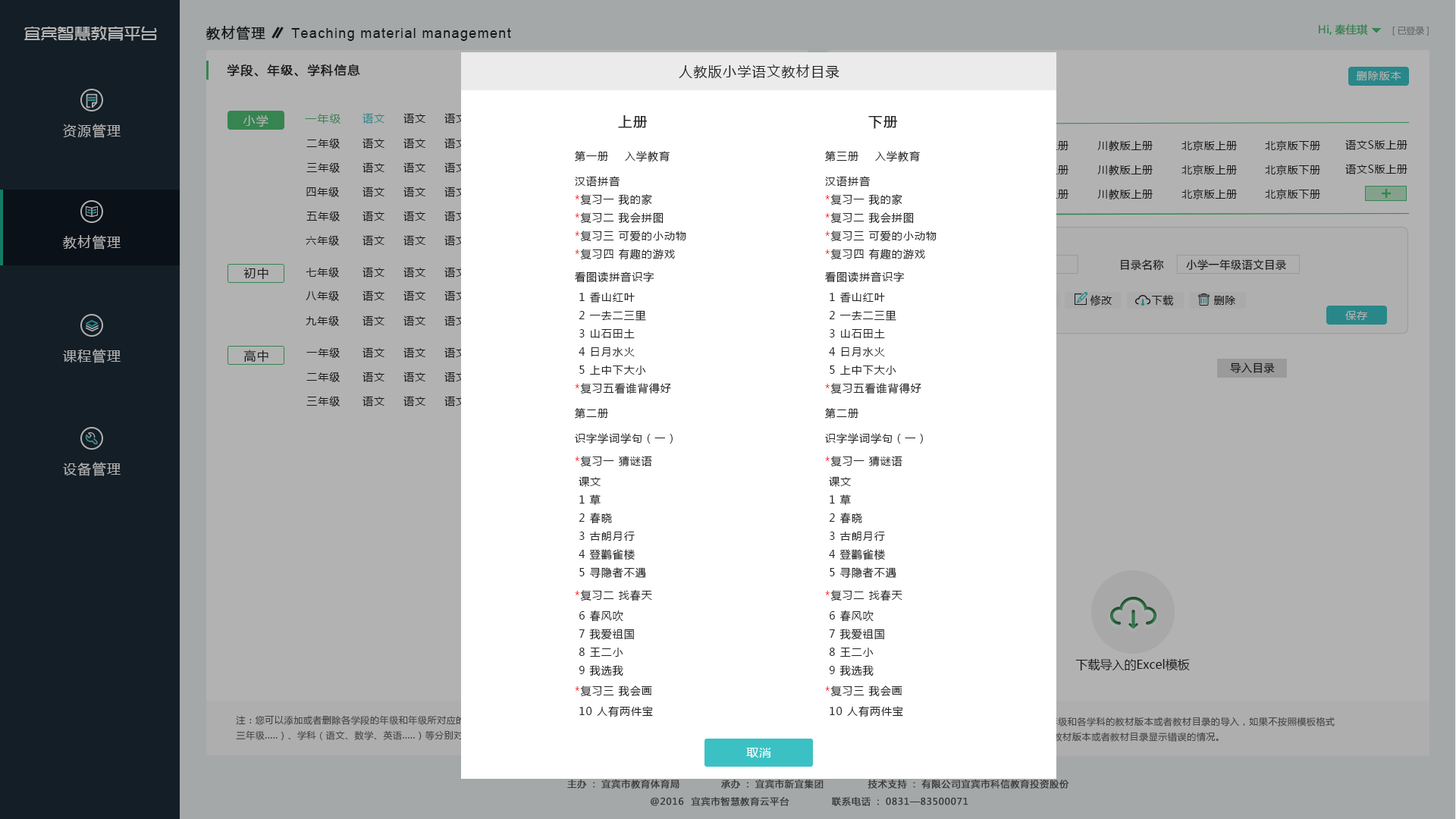
<style>
.page{position:relative;width:1456px;height:819px;background:#ffffff}
.page>*{position:absolute;margin:0}
.t1{font:16.7px "TRENDS";color:#b2b2b2}
.t2{font:13.6px "MicrosoftYaHei";letter-spacing:0.075em;color:#222222;font-weight:bold}
.t3{font:13.6px "ArialMT";letter-spacing:0.075em;color:#222222}
.t4{font:10.6px "MicrosoftYaHei";color:#368450;font-weight:bold}
.t5{font:9.1px "MicrosoftYaHei";letter-spacing:-0.01em;color:#5e5e5e}
.t6{font:12.1px "MicrosoftYaHei";letter-spacing:0.075em;color:#222222;font-weight:bold}
.t7{font:13.6px "MicrosoftYaHei";letter-spacing:0.075em;color:#222222}
.t8{font:10.6px "MicrosoftYaHei";letter-spacing:0.075em;color:#b2b2b2}
.t9{font:11.4px "MicrosoftYaHei";letter-spacing:0.075em;color:#368450}
.t10{font:10.6px "MicrosoftYaHei";letter-spacing:0.075em;color:#29878a}
.t11{font:10.6px "MicrosoftYaHei";letter-spacing:0.075em;color:#222222}
.t12{font:13.6px "MicrosoftYaHei";letter-spacing:0.075em;color:#b2b2b2}
.t13{font:12.1px "MicrosoftYaHei";letter-spacing:0.075em;color:#b2b2b2}
.t14{font:10.6px/18.2px "MicrosoftYaHei";letter-spacing:0.075em;color:#222222}
.t15{font:13.6px/18.2px "MicrosoftYaHei";letter-spacing:0.075em;color:#222222;font-weight:bold}
.t16{font:10.6px/25px "MicrosoftYaHei";letter-spacing:0.075em;color:#222222}
.t17{font:10.6px/18.2px "MicrosoftYaHei";letter-spacing:0.075em;color:#ff0000}
.t18{font:10.6px/22.7px "MicrosoftYaHei";letter-spacing:0.075em;color:#222222}
.t19{font:10.6px/20.5px "MicrosoftYaHei";letter-spacing:0.075em;color:#222222}
.t20{font:10.6px "MicrosoftYaHei";letter-spacing:0.05em;color:#222222}
.t21{font:12.1px "MicrosoftYaHei";letter-spacing:0.075em;color:#222222}
.t22{font:10.6px "MicrosoftYaHei";letter-spacing:0.05em;color:#b2b2b2}
.t23{font:12.1px "MicrosoftYaHei";color:#222222}
.t24{font:12.1px "MicrosoftYaHei";letter-spacing:0.05em;color:#ffffff}
.t25{font:9.1px "MicrosoftYaHei";letter-spacing:0.05em;color:#3b3b3b;font-weight:bold}
</style>
<div class="page">
<p class="t1" style="left:24px;top:26px;width:133px;height:15px">宜宾智慧教育平台</p>
<p class="t2" style="left:206px;top:26px;width:59px;height:14px">教材管理</p>
<p class="t3" style="left:291px;top:28px;width:220px;height:13px">Teaching material management</p>
<p class="t4" style="left:1319px;top:24px;width:49px;height:11px">Hi,秦佳琪</p>
<p class="t5" style="left:1392px;top:26px;width:37px;height:10px">[已登录]</p>
<p class="t6" style="left:227px;top:64px;width:133px;height:13px">学段、年级、学科信息</p>
<p class="t7" style="left:679px;top:64px;width:160px;height:15px">人教版小学语文教材目录</p>
<p class="t8" style="left:1356px;top:71px;width:45px;height:9px">删除版本</p>
<p class="t9" style="left:305px;top:114px;width:36px;height:10px">一年级</p>
<p class="t10" style="left:362px;top:113px;width:22px;height:11px">语文</p>
<p class="t11" style="left:403px;top:113px;width:22px;height:11px">语文</p>
<p class="t11" style="left:444px;top:113px;width:22px;height:11px">语文</p>
<p class="t12" style="left:63px;top:124px;width:58px;height:14px">资源管理</p>
<p class="t13" style="left:243px;top:115px;width:25px;height:12px">小学</p>
<p class="t14" style="left:575px;top:115px;width:111px;height:602px"><span class="t15">上册<br></span><br>第一册    入学教<span class="t16">育 <br></span>汉语拼音 <br><span class="t17">*</span>复习一 我的家<br><span class="t17">*</span>复习二 我会拼图<br><span class="t17">*</span>复习三 可爱的小动物<br><span class="t17">*</span>复习四 有趣的游<span class="t18">戏<br></span><span class="t19">看</span>图读拼音识<span class="t19">字<br></span> 1 香山红叶<br> 2 一去二三里<br> 3 山石田土<br> 4 日月水火<br> 5 上中下大小<br><span class="t17">*</span>复习五看谁背得<span class="t16">好<br></span>第二<span class="t16">册 <br></span><span class="t19">识</span>字学词学句（<span class="t18">一） <br></span><span class="t17">*</span>复习一 猜谜<span class="t19">语 <br></span> 课文   <br> 1 草<br> 2 春晓<br> 3 古朗月行<br> 4 登鹳雀楼 <br> 5 寻隐者不<span class="t18">遇<br></span><span class="t17">*</span>复习二 找春天  <br> 6 春风吹 <br> 7 我爱祖国 <br> 8 王二小 <br> 9 我选<span class="t19">我 <br></span><span class="t17">*</span>复习三 我会<span class="t19">画  <br></span> 10 人有两件宝 <br> 11 司马光<br> 12 聪明的华佗<br> 13 小猴子下山</p>
<p class="t14" style="left:825px;top:116px;width:112px;height:601px"><span class="t15">下册<br></span><br>第三册    入学教<span class="t16">育 <br></span>汉语拼音 <br><span class="t17">*</span>复习一 我的家<br><span class="t17">*</span>复习二 我会拼图<br><span class="t17">*</span>复习三 可爱的小动物<br><span class="t17">*</span>复习四 有趣的游<span class="t18">戏<br></span><span class="t19">看</span>图读拼音识<span class="t19">字<br></span> 1 香山红叶<br> 2 一去二三里<br> 3 山石田土<br> 4 日月水火<br> 5 上中下大小<br><span class="t17">*</span>复习五看谁背得<span class="t16">好<br></span>第二<span class="t16">册 <br></span><span class="t19">识</span>字学词学句（<span class="t18">一） <br></span><span class="t17">*</span>复习一 猜谜<span class="t19">语 <br></span> 课文   <br> 1 草<br> 2 春晓<br> 3 古朗月行<br> 4 登鹳雀楼 <br> 5 寻隐者不<span class="t18">遇<br></span><span class="t17">*</span>复习二 找春天  <br> 6 春风吹 <br> 7 我爱祖国 <br> 8 王二小 <br> 9 我选<span class="t19">我 <br></span><span class="t17">*</span>复习三 我会<span class="t19">画  <br></span> 10 人有两件宝 <br> 11 司马光<br> 12 聪明的华佗<br> 13 小猴子下山</p>
<p class="t11" style="left:306px;top:138px;width:34px;height:11px">二年级</p>
<p class="t11" style="left:362px;top:138px;width:22px;height:11px">语文</p>
<p class="t11" style="left:403px;top:138px;width:22px;height:11px">语文</p>
<p class="t11" style="left:444px;top:138px;width:22px;height:11px">语文</p>
<p class="t20" style="left:1097px;top:140px;width:56px;height:11px">川教版上册</p>
<p class="t20" style="left:1181px;top:140px;width:56px;height:11px">北京版上册</p>
<p class="t20" style="left:1265px;top:140px;width:55px;height:11px">北京版下册</p>
<p class="t20" style="left:1345px;top:140px;width:62px;height:10px">语文S版上册</p>
<p class="t11" style="left:306px;top:162px;width:34px;height:11px">三年级</p>
<p class="t11" style="left:362px;top:162px;width:22px;height:11px">语文</p>
<p class="t11" style="left:403px;top:162px;width:22px;height:11px">语文</p>
<p class="t11" style="left:444px;top:162px;width:22px;height:11px">语文</p>
<p class="t20" style="left:1097px;top:165px;width:56px;height:10px">川教版上册</p>
<p class="t20" style="left:1181px;top:165px;width:56px;height:10px">北京版上册</p>
<p class="t20" style="left:1265px;top:165px;width:55px;height:10px">北京版下册</p>
<p class="t20" style="left:1345px;top:164px;width:62px;height:10px">语文S版上册</p>
<p class="t11" style="left:306px;top:187px;width:33px;height:10px">四年级</p>
<p class="t11" style="left:362px;top:187px;width:22px;height:10px">语文</p>
<p class="t11" style="left:403px;top:187px;width:22px;height:10px">语文</p>
<p class="t11" style="left:444px;top:187px;width:22px;height:10px">语文</p>
<p class="t20" style="left:1097px;top:189px;width:56px;height:10px">川教版上册</p>
<p class="t20" style="left:1181px;top:189px;width:56px;height:10px">北京版上册</p>
<p class="t20" style="left:1265px;top:189px;width:55px;height:10px">北京版下册</p>
<p class="t11" style="left:306px;top:211px;width:34px;height:10px">五年级</p>
<p class="t11" style="left:362px;top:211px;width:22px;height:10px">语文</p>
<p class="t11" style="left:403px;top:211px;width:22px;height:10px">语文</p>
<p class="t11" style="left:444px;top:211px;width:22px;height:10px">语文</p>
<p class="t12" style="left:63px;top:235px;width:58px;height:14px">教材管理</p>
<p class="t11" style="left:306px;top:235px;width:33px;height:11px">六年级</p>
<p class="t11" style="left:362px;top:235px;width:22px;height:11px">语文</p>
<p class="t11" style="left:403px;top:235px;width:22px;height:11px">语文</p>
<p class="t11" style="left:444px;top:235px;width:22px;height:11px">语文</p>
<p class="t21" style="left:243px;top:268px;width:25px;height:11px">初中</p>
<p class="t11" style="left:306px;top:267px;width:33px;height:11px">七年级</p>
<p class="t11" style="left:362px;top:267px;width:22px;height:11px">语文</p>
<p class="t11" style="left:403px;top:267px;width:22px;height:11px">语文</p>
<p class="t11" style="left:444px;top:267px;width:22px;height:11px">语文</p>
<p class="t20" style="left:1121px;top:259px;width:165px;height:12px">目录名称      小学一年级语文目录</p>
<p class="t11" style="left:306px;top:290px;width:33px;height:11px">八年级</p>
<p class="t11" style="left:362px;top:290px;width:22px;height:11px">语文</p>
<p class="t11" style="left:403px;top:290px;width:22px;height:11px">语文</p>
<p class="t11" style="left:444px;top:290px;width:22px;height:11px">语文</p>
<p class="t20" style="left:1090px;top:295px;width:22px;height:11px">修改</p>
<p class="t20" style="left:1152px;top:295px;width:22px;height:11px">下载</p>
<p class="t20" style="left:1213px;top:296px;width:23px;height:9px">删除</p>
<p class="t11" style="left:306px;top:315px;width:33px;height:11px">九年级</p>
<p class="t11" style="left:362px;top:315px;width:22px;height:11px">语文</p>
<p class="t11" style="left:403px;top:315px;width:22px;height:11px">语文</p>
<p class="t11" style="left:444px;top:315px;width:22px;height:11px">语文</p>
<p class="t22" style="left:1345px;top:311px;width:22px;height:9px">保存</p>
<p class="t12" style="left:63px;top:349px;width:58px;height:14px">课程管理</p>
<p class="t21" style="left:243px;top:350px;width:25px;height:12px">高中</p>
<p class="t11" style="left:306px;top:347px;width:34px;height:11px">一年级</p>
<p class="t11" style="left:362px;top:347px;width:22px;height:11px">语文</p>
<p class="t11" style="left:403px;top:347px;width:22px;height:11px">语文</p>
<p class="t11" style="left:444px;top:347px;width:22px;height:11px">语文</p>
<p class="t20" style="left:1230px;top:362px;width:45px;height:11px">导入目录</p>
<p class="t11" style="left:306px;top:372px;width:34px;height:10px">二年级</p>
<p class="t11" style="left:362px;top:372px;width:22px;height:10px">语文</p>
<p class="t11" style="left:403px;top:372px;width:22px;height:10px">语文</p>
<p class="t11" style="left:444px;top:372px;width:22px;height:10px">语文</p>
<p class="t11" style="left:306px;top:396px;width:34px;height:10px">三年级</p>
<p class="t11" style="left:362px;top:396px;width:22px;height:10px">语文</p>
<p class="t11" style="left:403px;top:396px;width:22px;height:10px">语文</p>
<p class="t11" style="left:444px;top:396px;width:22px;height:10px">语文</p>
<p class="t12" style="left:63px;top:462px;width:58px;height:14px">设备管理</p>
<p class="t23" style="left:1075px;top:658px;width:115px;height:13px">下载导入的Excel模板</p>
<p class="t24" style="left:746px;top:748px;width:24px;height:10px">取消</p>
<p class="t25" style="left:567px;top:780px;width:112px;height:9px">主办：宜宾市教育体育局</p>
<p class="t25" style="left:721px;top:780px;width:103px;height:9px">承办：宜宾市新宜集团</p>
<p class="t25" style="left:868px;top:780px;width:201px;height:9px">技术支持：有限公司宜宾市科信教育投资股份</p>
<p class="t25" style="left:651px;top:797px;width:138px;height:9px">@2016  宜宾市智慧教育云平台</p>
<p class="t25" style="left:832px;top:797px;width:136px;height:9px">联系电话：0831—83500071</p>
</div>
